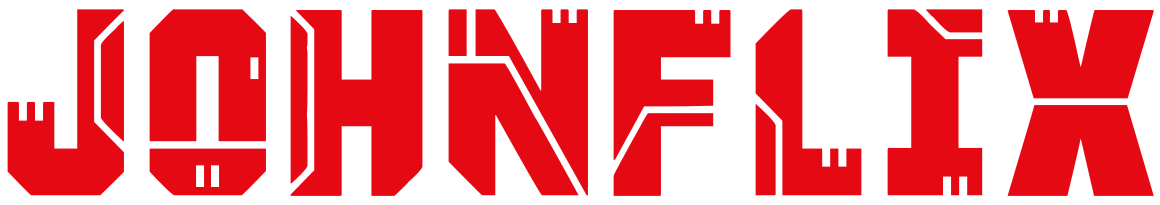
<style>
.page{position:relative;width:1160px;height:205px;background:#e50914}
.page>*{position:absolute;margin:0}
.t1{font:150px "CyborgPunk";color:#e50914}
</style>
<div class="page">
<p class="t1" style="left:7px;top:9px;width:1147px;height:187px">JOHNFLIX</p>
</div>
